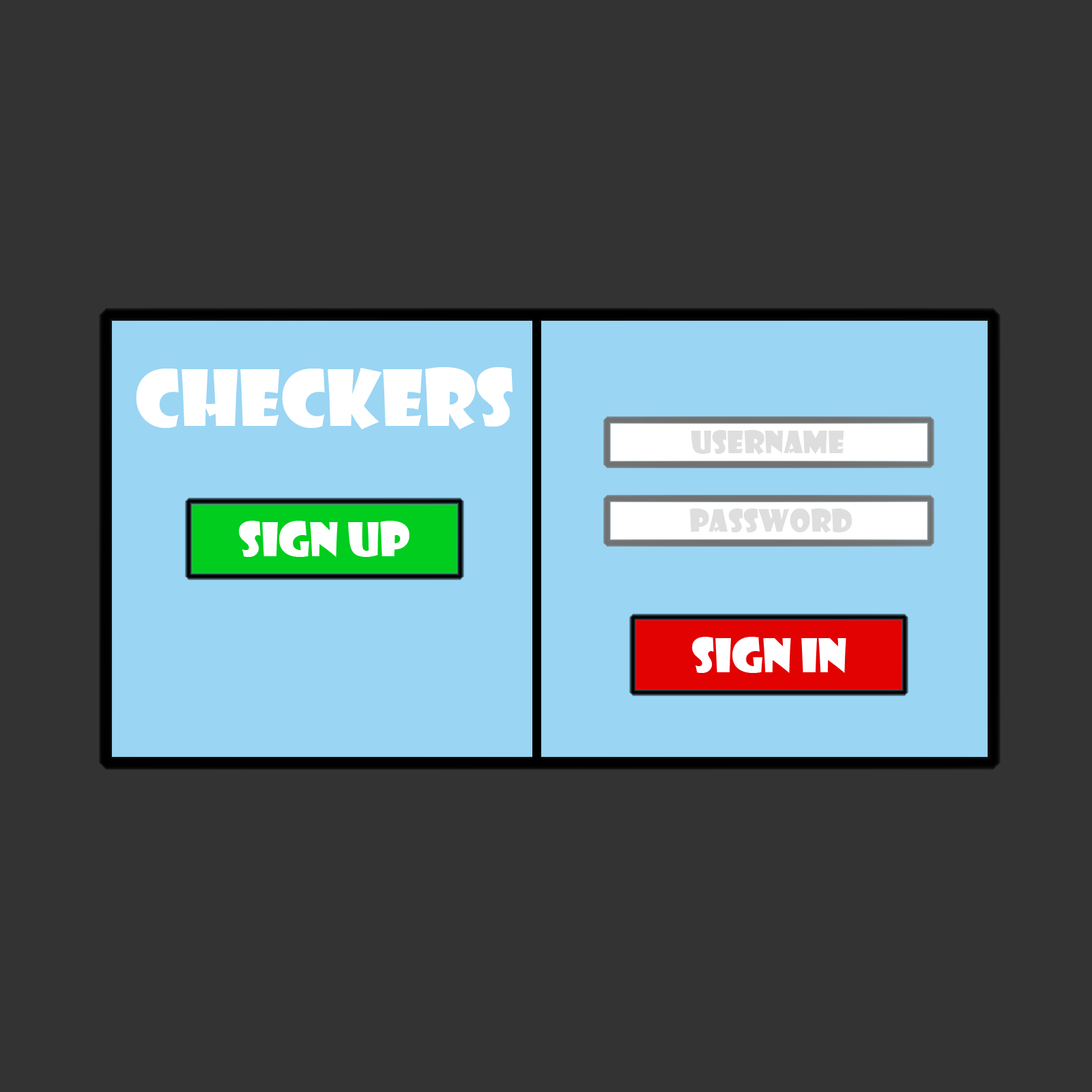
<style>
.page{position:relative;width:1092px;height:1092px;background:#333333}
.page>*{position:absolute;margin:0}
.t1{font:75.8px "ShowcardGothic-Reg";color:#ffffff}
.t2{font:30.3px "ShowcardGothic-Reg";color:#dedede}
.t3{font:45.5px "ShowcardGothic-Reg";color:#ffffff}
</style>
<div class="page">
<p class="t1" style="left:136px;top:367px;width:377px;height:62px">checkers</p>
<p class="t2" style="left:691px;top:430px;width:153px;height:25px">username</p>
<p class="t2" style="left:689px;top:508px;width:163px;height:25px">PassWord</p>
<p class="t3" style="left:239px;top:521px;width:170px;height:36px">Sign Up</p>
<p class="t3" style="left:692px;top:637px;width:154px;height:36px">sign In</p>
</div>
